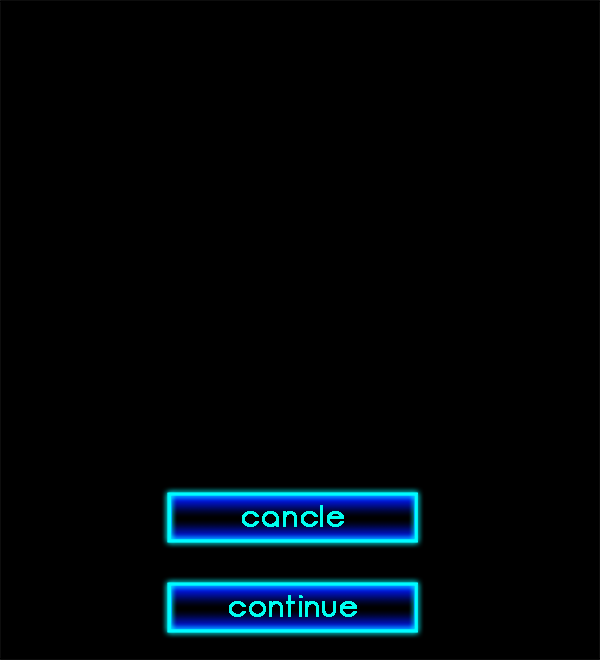
<style>
.page{position:relative;width:600px;height:660px;background:#000000}
.page>*{position:absolute;margin:0}
.t1{font:30px "Opificio";letter-spacing:0.05em;color:#00fff0;font-weight:bold}
</style>
<div class="page">
<p class="t1" style="left:242px;top:505px;width:102px;height:22px">cancle</p>
<p class="t1" style="left:229px;top:595px;width:128px;height:22px">continue</p>
</div>
